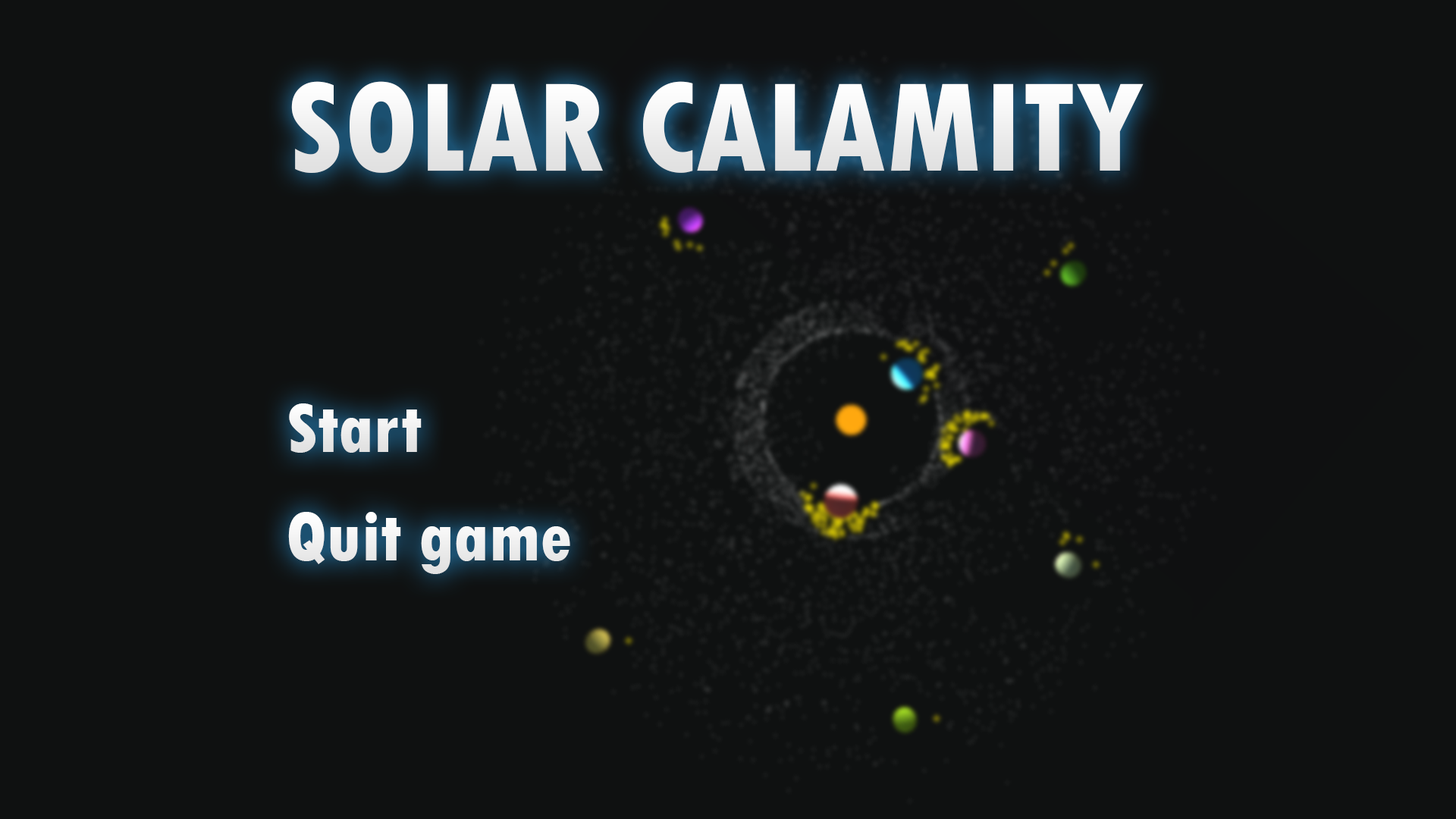
<style>
.page{position:relative;width:1456px;height:819px;background:#0f1111}
.page>*{position:absolute;margin:0}
.t1{font:132.7px "TwCenMT-CondensedExtraBold";color:#ffffff}
.t2{font:73.6px "TwCenMT-CondensedExtraBold";color:#ffffff}
</style>
<div class="page">
<p class="t1" style="left:291px;top:81px;width:853px;height:92px">SOLAR CALAMITY</p>
<p class="t2" style="left:289px;top:403px;width:133px;height:50px">Start</p>
<p class="t2" style="left:288px;top:512px;width:282px;height:62px">Quit game</p>
</div>
